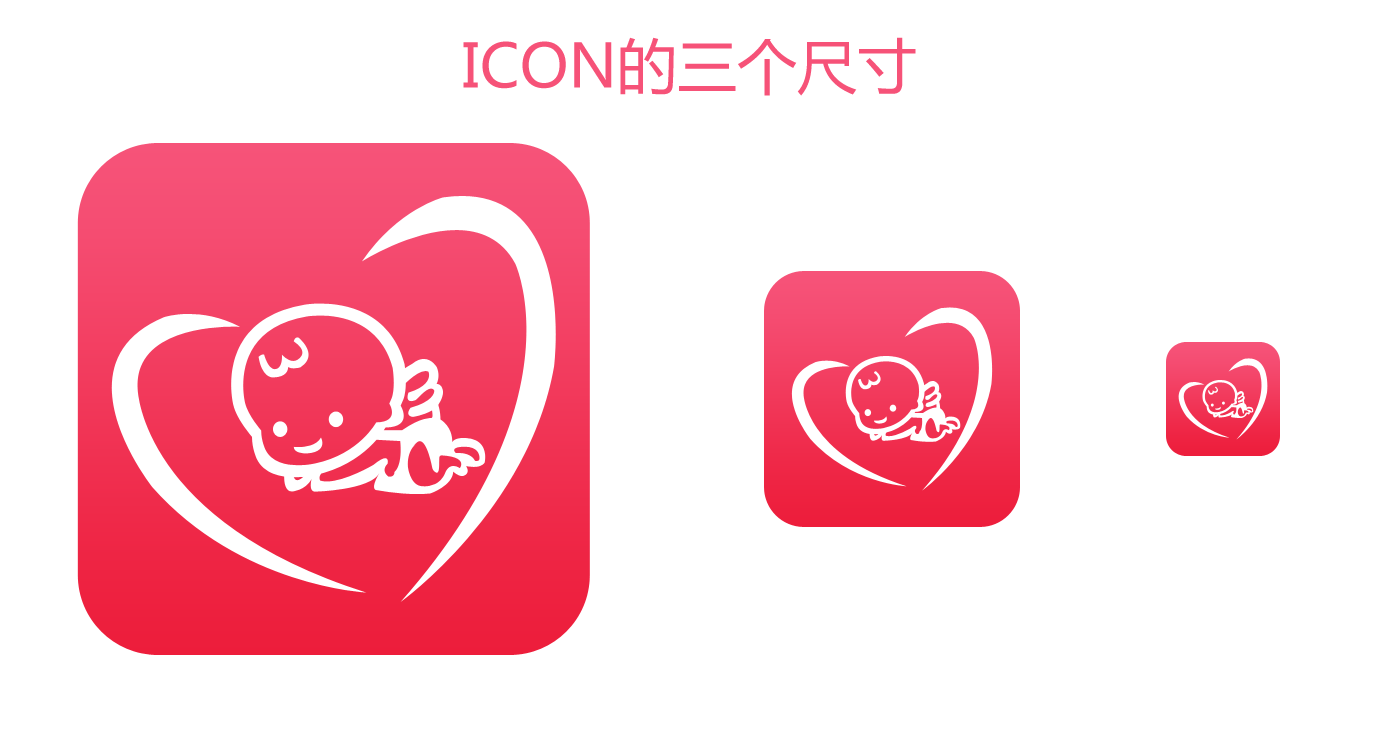
<style>
.page{position:relative;width:1400px;height:750px;background:#ffffff}
.page>*{position:absolute;margin:0}
.t1{font:60px "MicrosoftYaHei";color:#f65278}
</style>
<div class="page">
<p class="t1" style="left:463px;top:37px;width:453px;height:59px">ICON的三个尺寸</p>
</div>
